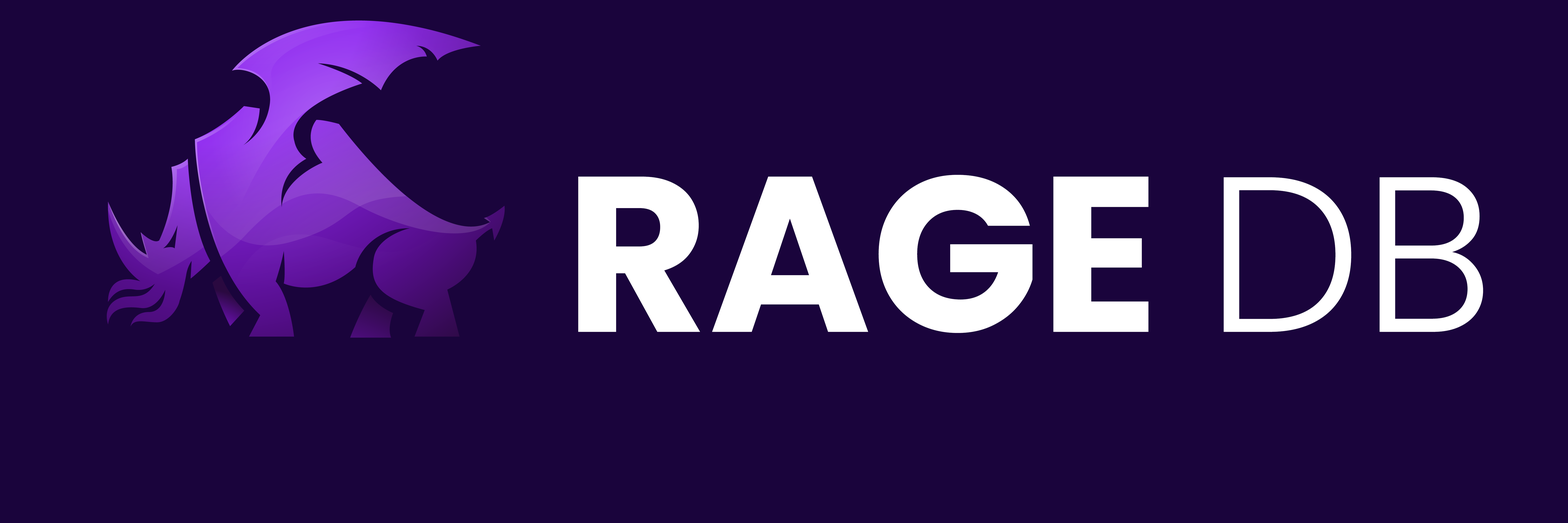
<style>
.page{position:relative;width:1568px;height:523px;background:#1a043c}
.page>*{position:absolute;margin:0}
.t1{font:220.9px "Poppins-Bold";color:#ffffff}
.t2{font:220.9px "Poppins-Light";color:#ffffff}
</style>
<div class="page">
<p class="t1" style="left:578px;top:175px;width:905px;height:158px">RAGE <span class="t2">DB</span></p>
</div>
